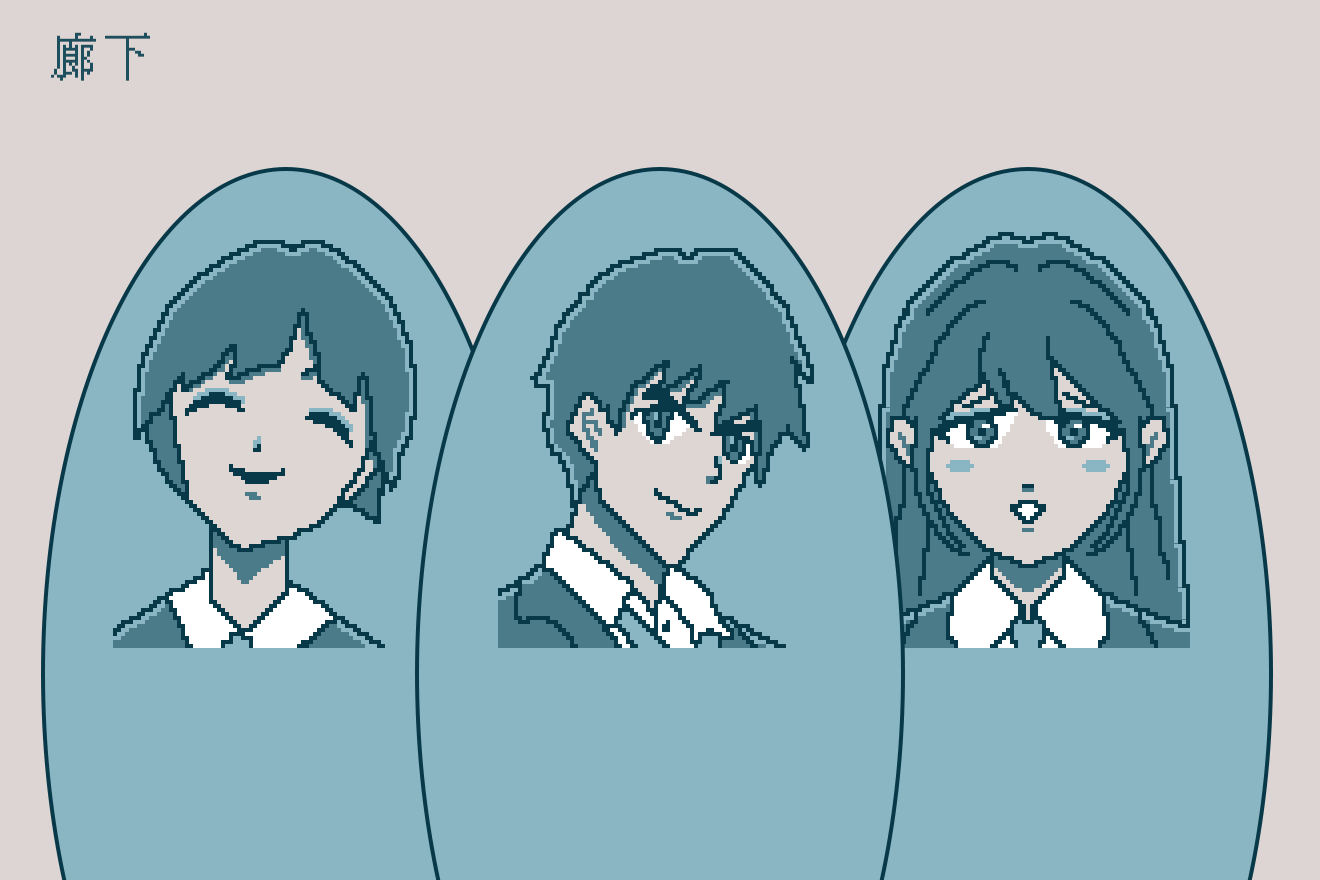
<style>
.page{position:relative;width:1320px;height:880px;background:#8ab6c3}
.page>*{position:absolute;margin:0}
.t1{font:48px "KH-Dot-kagurazaka-16";letter-spacing:0.14em;color:#1e4f5e}
</style>
<div class="page">
<p class="t1" style="left:51px;top:32px;width:99px;height:49px">廊下</p>
</div>
